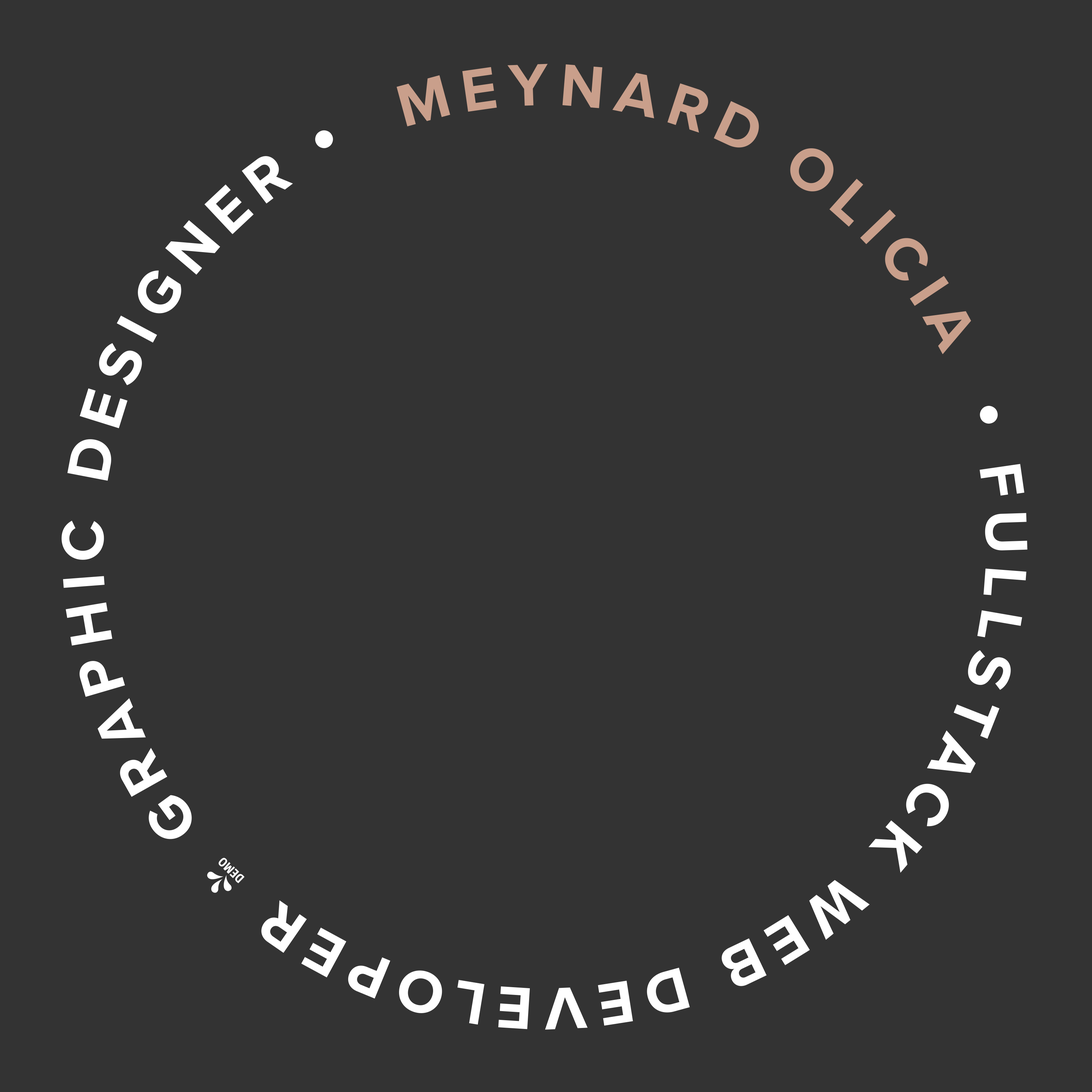
<style>
.page{position:relative;width:1092px;height:1092px;background:#333333}
.page>*{position:absolute;margin:0}
.t1{font:61.3px "FONTSPRINGDEMO-ProximaNovaBold";letter-spacing:0.16em;color:#ffffff;text-transform:uppercase}
.t2{font:61.3px "FONTSPRINGDEMO-ProximaNovaBold";letter-spacing:0.16em;color:#c99f8b;text-transform:uppercase}
.t3{font:61.3px "Arial-BoldMT";letter-spacing:0.16em;color:#ffffff;text-transform:uppercase}
</style>
<div class="page">
<p class="t1" style="left:61px;top:64px;width:967px;height:966px;text-align:right"><span class="t2">MEYNARD OLICIA  </span><span class="t3">•</span> Fullstack web developer / graphic designer <span class="t3">•</span></p>
</div>
